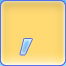
<style>
.page{position:relative;width:66px;height:66px;background:#ffd972}
.page>*{position:absolute;margin:0}
.t1{font:41px "Tahoma-Bold"}
</style>
<div class="page">
<p class="t1" style="left:20px;top:39px;width:12px;height:16px">,</p>
<p class="t1" style="left:20px;top:39px;width:12px;height:16px">,</p>
</div>
